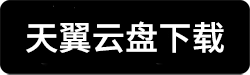
<style>
.page{position:relative;width:250px;height:75px;background:#000000}
.page>*{position:absolute;margin:0}
.t1{font:33.3px "SourceHanSansCN-Medium";color:#ffffff}
</style>
<div class="page">
<p class="t1" style="left:26px;top:21px;width:198px;height:32px">天翼云盘下载</p>
</div>
